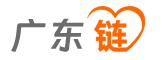
<style>
.page{position:relative;width:162px;height:60px;background:#ffffff}
.page>*{position:absolute;margin:0}
.t1{font:37.5px "DingTalk-JinBuTi";color:#6c6c6c;font-weight:bold}
</style>
<div class="page">
<p class="t1" style="left:11px;top:18px;width:73px;height:34px">广东</p>
</div>
